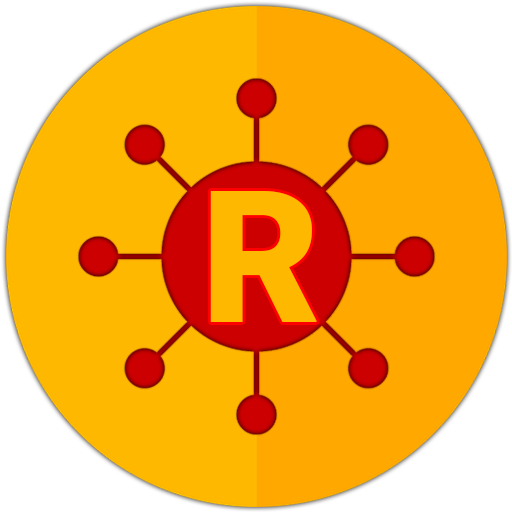
<style>
.page{position:relative;width:512px;height:512px;background:#feb800}
.page>*{position:absolute;margin:0}
.t1{font:184.1px "Roboto-Black";color:#ffb800;text-transform:uppercase}
</style>
<div class="page">
<p class="t1" style="left:210px;top:191px;width:107px;height:131px">R</p>
</div>
